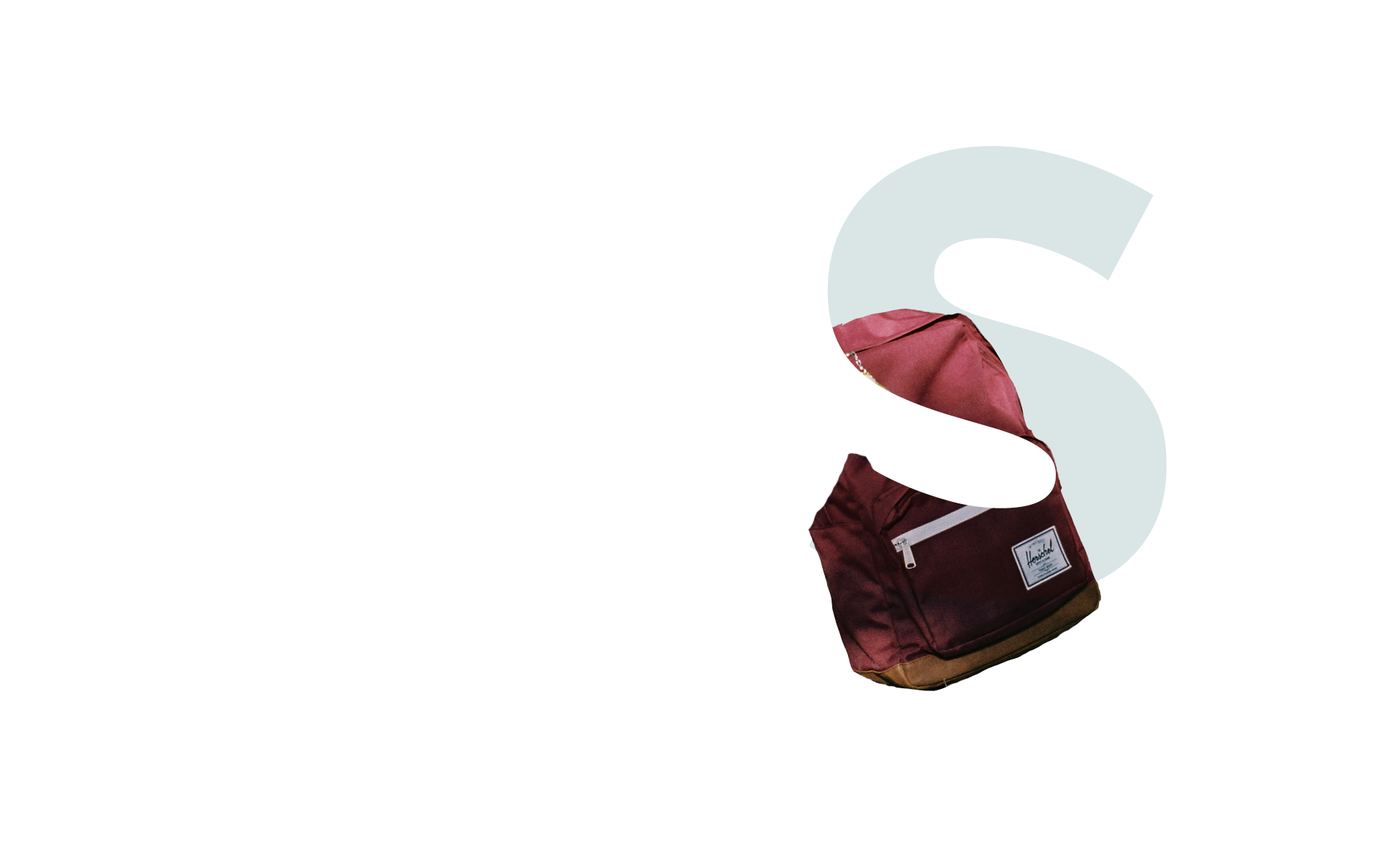
<style>
.page{position:relative;width:1381px;height:863px;background:#ffffff}
.page>*{position:absolute;margin:0}
.t1{font:628.8px "Raleway-ExtraBold";letter-spacing:0.06em}
</style>
<div class="page">
<p class="t1" style="left:809px;top:146px;width:358px;height:455px">S</p>
</div>
